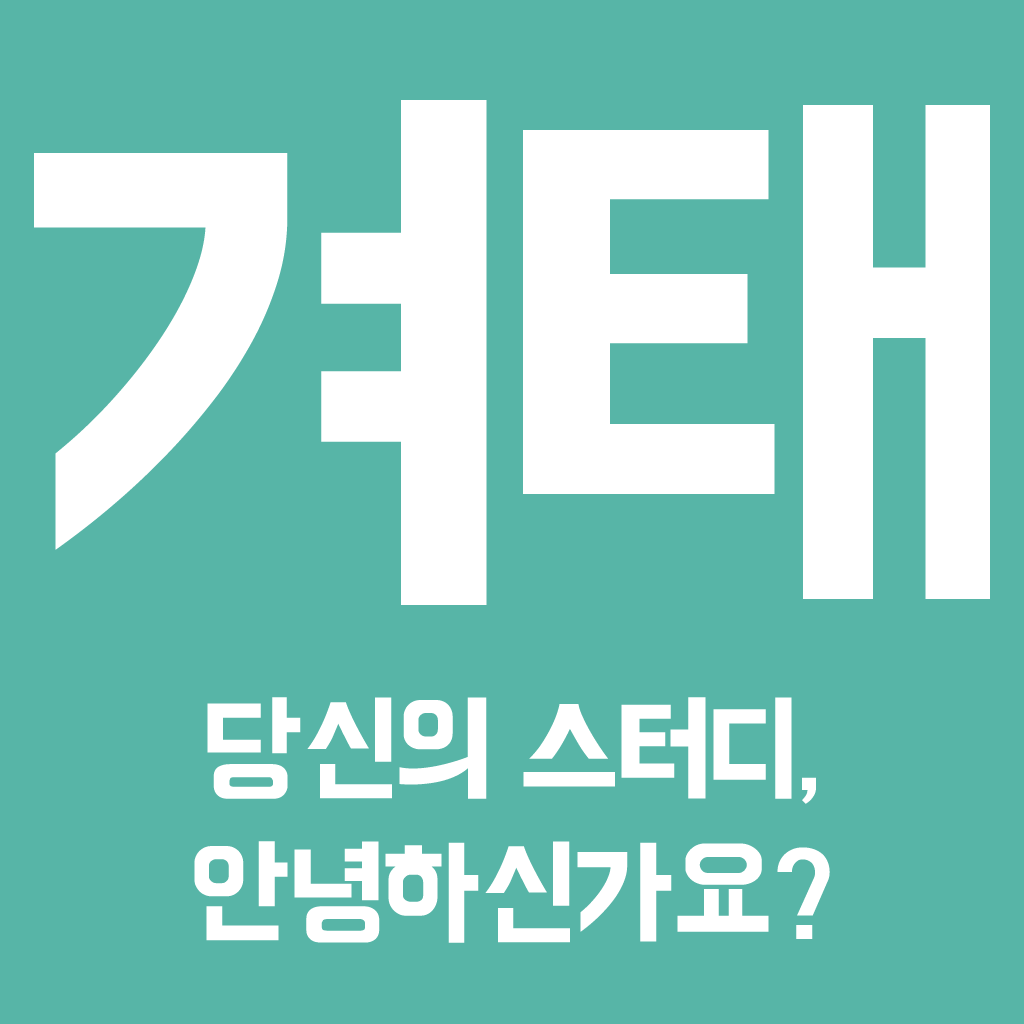
<style>
.page{position:relative;width:1024px;height:1024px;background:#57b5a7}
.page>*{position:absolute;margin:0}
.t1{font:600px "BMHANNA";color:#ffffff}
.t2{font:120px "BMHANNA";color:#ffffff}
</style>
<div class="page">
<p class="t1" style="left:34px;top:100px;width:956px;height:505px">겨태</p>
<p class="t2" style="left:194px;top:697px;width:636px;height:246px;text-align:center">당신의 스터디,<br>안녕하신가요?</p>
</div>
